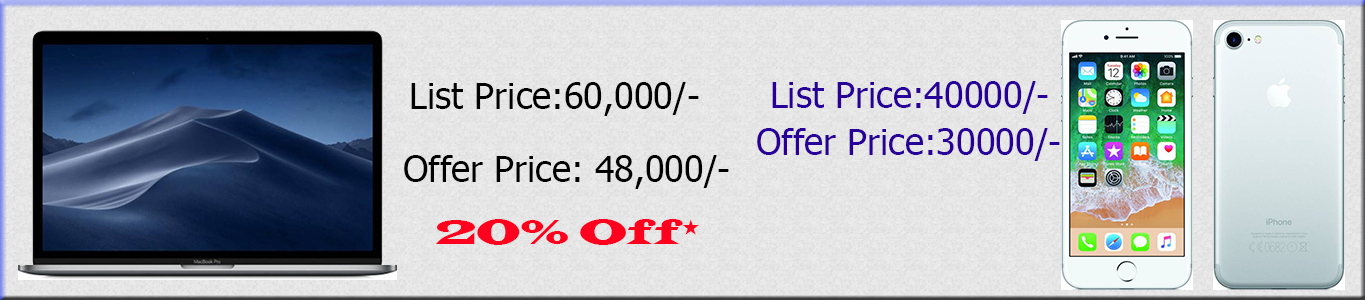
<style>
.page{position:relative;width:1365px;height:300px}
.page>*{position:absolute;margin:0}
.t1{font:36px "Tahoma";color:#000000}
.t2{font:36px "Tahoma";color:#280099}
.t3{font:36px "LatinWide";color:#ff011f}
</style>
<div class="page">
<p class="t1" style="left:411px;top:82px;width:288px;height:34px">List Price:60,000/-</p>
<p class="t2" style="left:772px;top:81px;width:276px;height:33px">List Price:40000/-</p>
<p class="t2" style="left:757px;top:128px;width:303px;height:33px">Offer Price:30000/-</p>
<p class="t1" style="left:404px;top:155px;width:325px;height:34px">Offer Price: 48,000/-</p>
<p class="t3" style="left:436px;top:219px;width:263px;height:26px">20% Off*</p>
</div>
